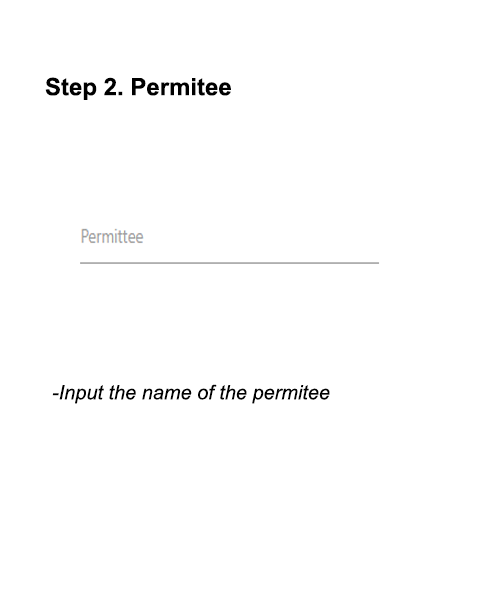
<style>
.page{position:relative;width:500px;height:600px;background:#ffffff}
.page>*{position:absolute;margin:0}
.t1{font:24px "Arial-BoldMT";color:#000000}
.t2{font:20px "Arial-ItalicMT";color:#000000}
</style>
<div class="page">
<p class="t1" style="left:45px;top:77px;width:186px;height:23px">Step 2. Permitee</p>
<p class="t2" style="left:52px;top:384px;width:278px;height:20px">-Input the name of the permitee</p>
</div>
